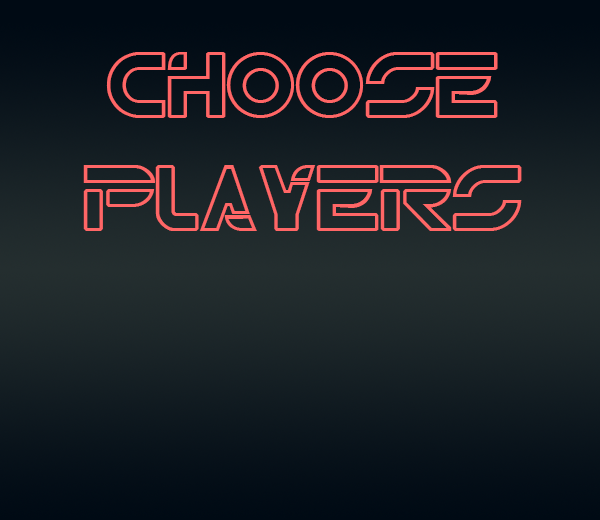
<style>
.page{position:relative;width:600px;height:520px}
.page>*{position:absolute;margin:0}
.t1{font:94px "TRN";color:#ff6666}
</style>
<div class="page">
<p class="t1" style="left:83px;top:52px;width:439px;height:179px;text-align:center">Choose Players</p>
</div>
